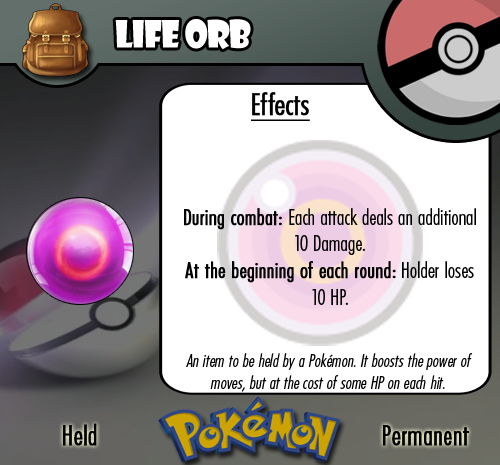
<style>
.page{position:relative;width:500px;height:465px;background:#ffffff}
.page>*{position:absolute;margin:0}
.t1{font:36.7px "ShowcardGothic-Reg";letter-spacing:-0.025em;color:#ffffff;scale:0.91 1}
.t2{font:22.2px "FuturaCondensedBQ-Light";color:#010101}
.t3{font:27.8px "FuturaCondensedBQ-Light";color:#010101;font-weight:bold}
.t4{font:30.6px "FuturaCondensedBQ-Light";color:#010101;font-weight:bold;text-decoration:underline}
.t5{font:22.2px "FuturaCondensedBQ-Light";color:#010101;font-weight:bold}
.t6{font:18.1px "FuturaCondensedBQ-Light";color:#010101;font-style:italic}
</style>
<div class="page">
<p class="t1" style="left:115px;top:19px;width:136px;height:31px">Life Orb</p>
<p class="t2" style="left:184px;top:92px;width:292px;height:213px"><span class="t3">  </span><span class="t4">Effects<br><br><br><br><br><br><br></span><span class="t5">During combat: </span>Each attack deals an additional 10 Damage. <br><span class="t5">At the beginning of each round:</span> Holder loses 10 HP.</p>
<p class="t6" style="left:186px;top:353px;width:287px;height:39px;text-align:center">An item to be held by a Pokémon. It boosts the power of moves, but at the cost of some HP on each hit.</p>
<p class="t3" style="left:63px;top:423px;width:34px;height:23px">Held</p>
<p class="t3" style="left:383px;top:425px;width:86px;height:21px">Permanent</p>
</div>
